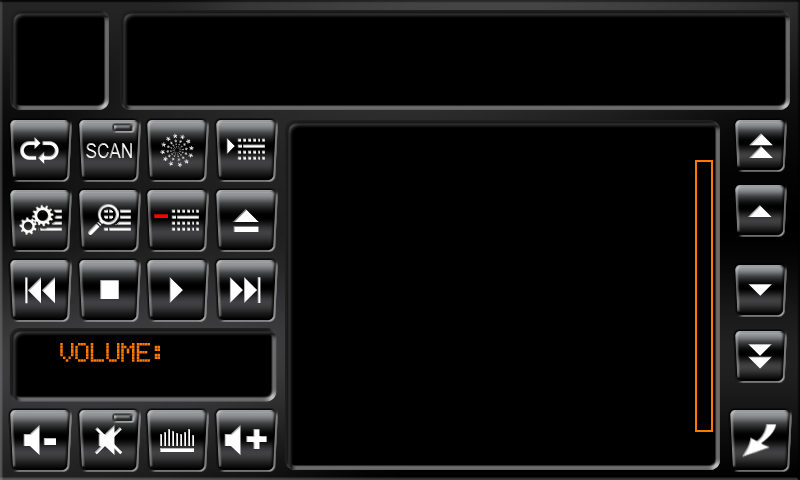
<style>
.page{position:relative;width:800px;height:480px;background:#000000}
.page>*{position:absolute;margin:0}
.t1{font:20.8px "ArialNarrow"}
.t2{font:25px "EricssonGA628";color:#ff7800}
</style>
<div class="page">
<p class="t1" style="left:86px;top:143px;width:46px;height:15px">SCAN</p>
<p class="t2" style="left:60px;top:343px;width:100px;height:19px">VOLUME:</p>
</div>
